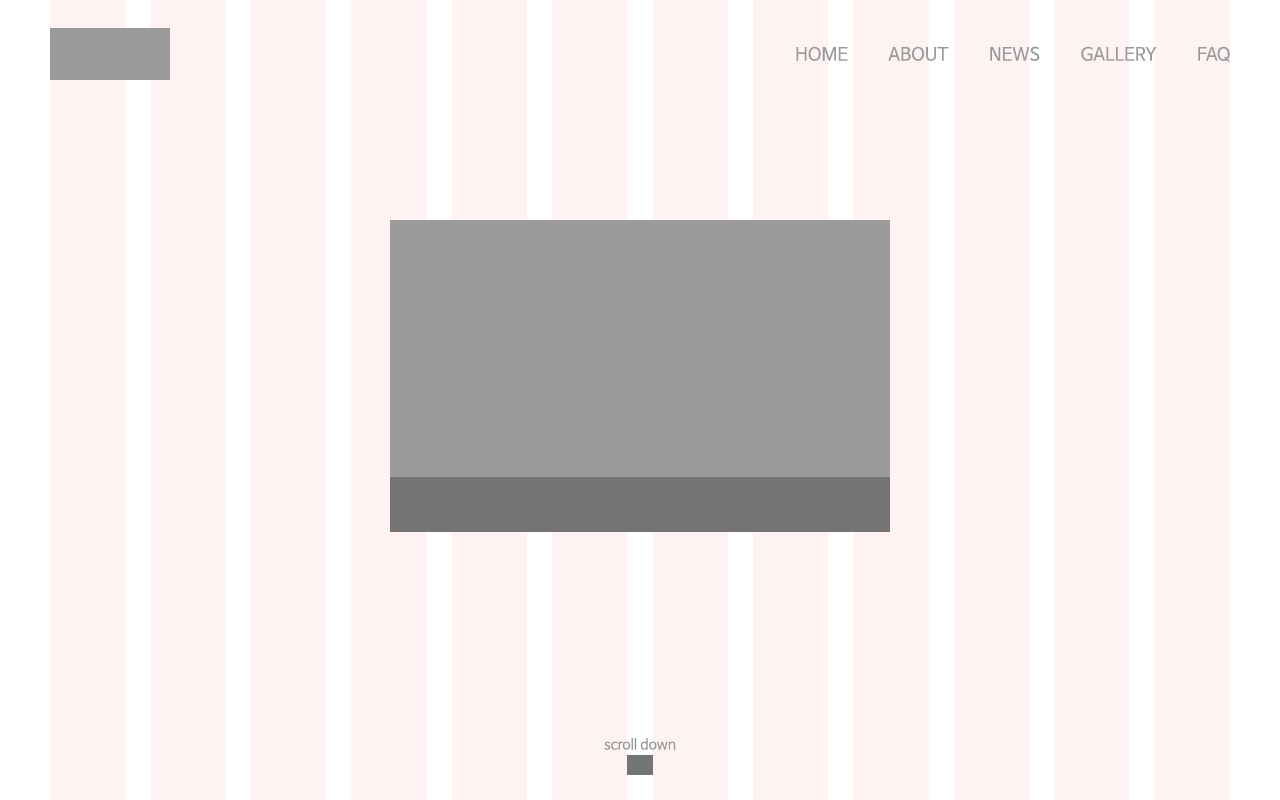
<style>
.page{position:relative;width:1280px;height:800px;background:#fff2f2}
.page>*{position:absolute;margin:0}
.t1{font:18px "NanumBarunGothic";color:#9a9a9a}
.t2{font:14px "NanumBarunGothic";color:#9a9a9a}
</style>
<div class="page">
<p class="t1" style="left:796px;top:46px;width:434px;height:16px">HOME          ABOUT          NEWS          GALLERY          FAQ</p>
<p class="t2" style="left:604px;top:738px;width:72px;height:12px">scroll down</p>
</div>
